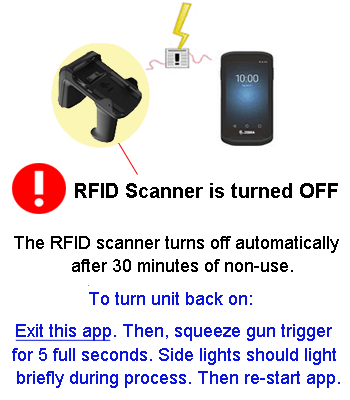
<style>
.page{position:relative;width:350px;height:400px;background:#ffffff}
.page>*{position:absolute;margin:0}
.t1{font:20px "Arial-BoldMT";color:#000000}
.t2{font:18px "ArialMT";color:#000000}
.t3{font:18px "ArialMT";color:#0b15dd}
</style>
<div class="page">
<p class="t1" style="left:75px;top:183px;width:263px;height:15px">RFID Scanner is turned OFF</p>
<p class="t2" style="left:14px;top:236px;width:325px;height:17px">The RFID scanner turns off automatically</p>
<p class="t2" style="left:72px;top:259px;width:221px;height:13px">after 30 minutes of non-use.</p>
<p class="t3" style="left:89px;top:292px;width:163px;height:13px">To turn unit back on:</p>
<p class="t3" style="left:16px;top:324px;width:316px;height:17px">Exit this app. Then, squeeze gun trigger</p>
<p class="t3" style="left:12px;top:348px;width:324px;height:17px">for 5 full seconds. Side lights should light</p>
<p class="t3" style="left:17px;top:371px;width:323px;height:17px">briefly during process. Then re-start app.</p>
</div>
